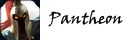
<style>
.page{position:relative;width:140px;height:40px;background:#ffffff}
.page>*{position:absolute;margin:0}
.t1{font:12px "VinerHandITC";color:#000000}
</style>
<div class="page">
<p class="t1" style="left:48px;top:10px;width:75px;height:17px">Pantheon</p>
</div>
